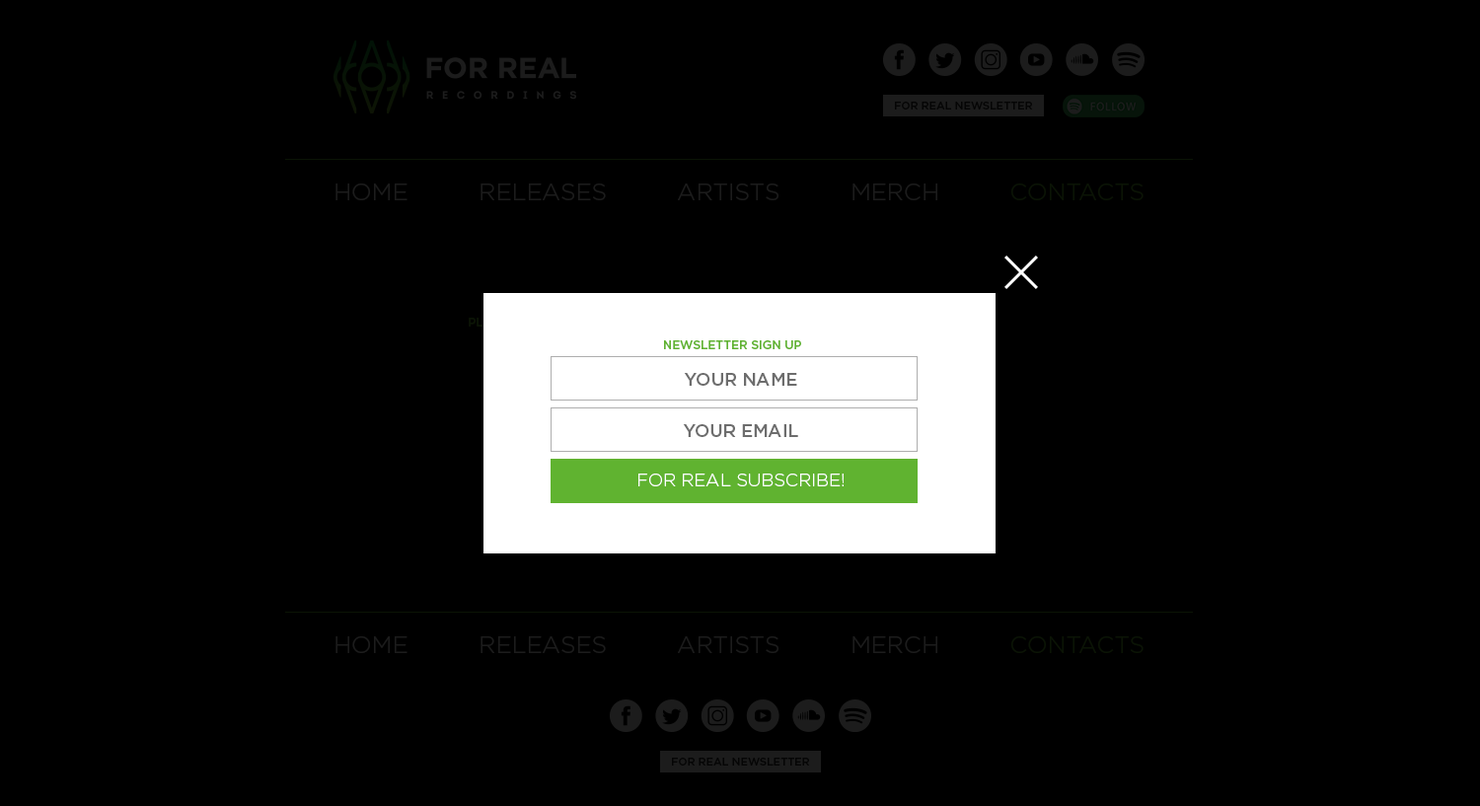
<style>
.page{position:relative;width:1480px;height:806px;background:#000000}
.page>*{position:absolute;margin:0}
.t1{font:10.9px "GothamPro-Medium";letter-spacing:-0.001em;color:#050505;text-transform:uppercase}
.t2{font:23.7px "GothamPro-Light";letter-spacing:-0.001em;color:#1c1c1c;text-transform:uppercase}
.t3{font:11.8px "GothamPro-Medium";letter-spacing:-0.001em;color:#60b330;text-transform:uppercase}
.t4{font:17.8px "GothamPro-Medium";letter-spacing:-0.001em;color:#6d6d6d;text-transform:uppercase}
.t5{font:17.8px "GothamPro-Light";letter-spacing:-0.001em;color:#ffffff;text-transform:uppercase}
</style>
<div class="page">
<p class="t1" style="left:895px;top:102px;width:138px;height:7px">for real NEWSLETTER</p>
<p class="t2" style="left:335px;top:183px;width:808px;height:17px">HOME          RELEASES          ARTISTS          MERCH          CONTACTS</p>
<p class="t3" style="left:664px;top:340px;width:137px;height:9px">Newsletter sign up</p>
<p class="t4" style="left:684px;top:373px;width:113px;height:13px">Your NAME</p>
<p class="t4" style="left:683px;top:424px;width:115px;height:13px">Your email</p>
<p class="t5" style="left:638px;top:473px;width:205px;height:13px">FOR REAL SUBSCRIBE!</p>
<p class="t2" style="left:335px;top:636px;width:808px;height:17px">HOME          RELEASES          ARTISTS          MERCH          CONTACTS</p>
<p class="t1" style="left:672px;top:758px;width:138px;height:7px">for real NEWSLETTER</p>
</div>
